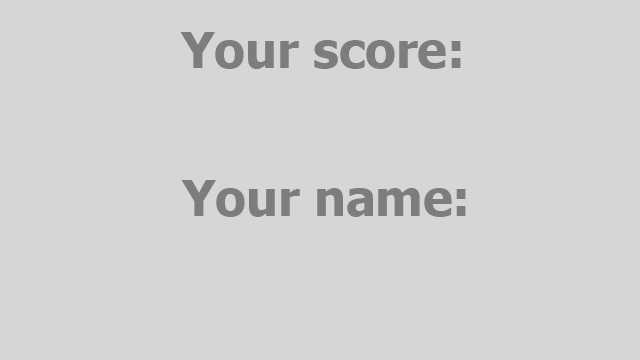
<style>
.page{position:relative;width:640px;height:360px;background:#d6d6d6}
.page>*{position:absolute;margin:0}
.t1{font:49.8px "Tahoma-Bold";color:#7d7d7d}
</style>
<div class="page">
<p class="t1" style="left:180px;top:32px;width:281px;height:37px">Your score:</p>
<p class="t1" style="left:181px;top:180px;width:285px;height:37px">Your name:</p>
</div>
